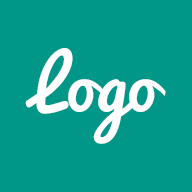
<style>
.page{position:relative;width:192px;height:192px;background:#009688}
.page>*{position:absolute;margin:0}
.t1{font:70px "Pacifico-Regular";color:#ffffff}
</style>
<div class="page">
<p class="t1" style="left:25px;top:48px;width:141px;height:96px">Logo</p>
</div>
